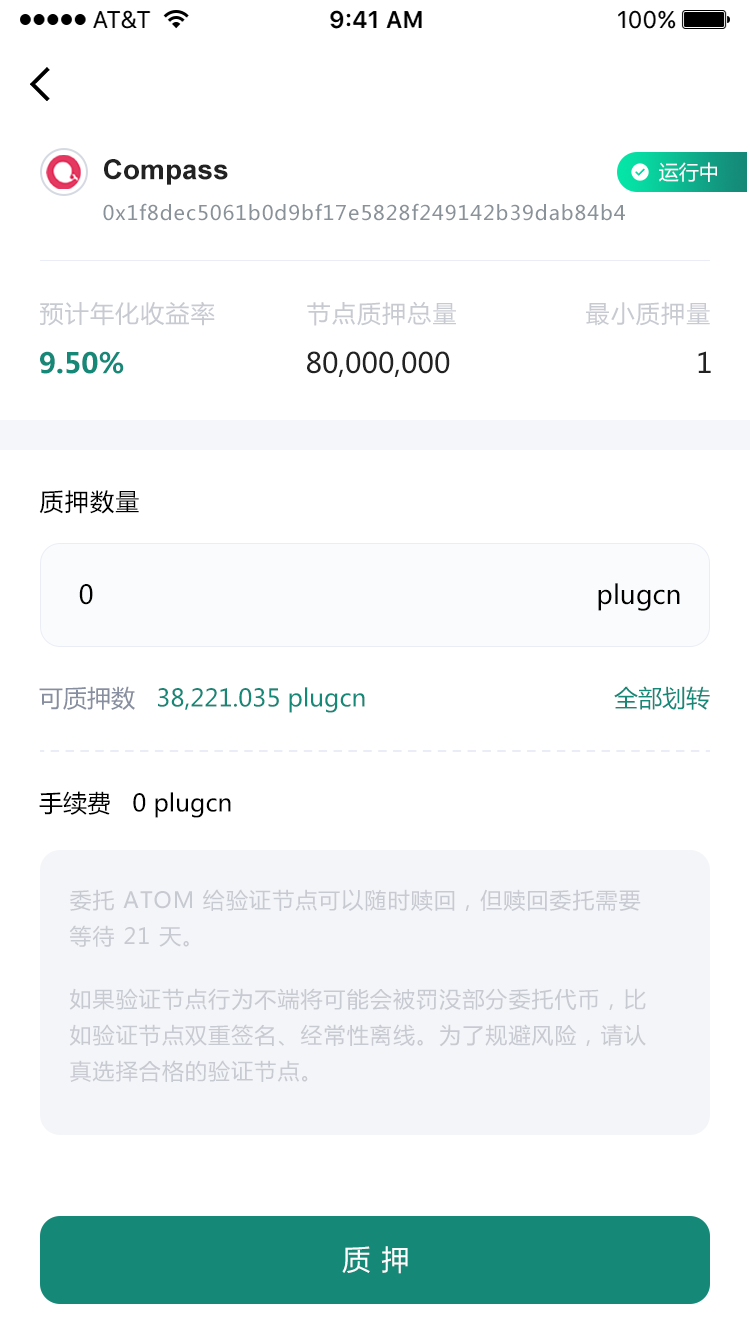
<style>
.page{position:relative;width:750px;height:1334px;background:#ffffff}
.page>*{position:absolute;margin:0}
.t1{font:28px "Arial-BoldMT";color:#222222}
.t2{font:20px "MicrosoftYaHei";color:#ffffff}
.t3{font:20px "MicrosoftYaHei";letter-spacing:0.05em;color:#8a9299}
.t4{font:24px "MicrosoftYaHei";letter-spacing:0.05em;color:#c8cad2}
.t5{font:28px "MicrosoftYaHei-Bold";color:#158878}
.t6{font:28px "MicrosoftYaHei";color:#222222}
.t7{font:24px "MicrosoftYaHei";letter-spacing:0.05em;color:#000000}
.t8{font:26px "MicrosoftYaHei";letter-spacing:0.05em;color:#000000}
.t9{font:26px "MicrosoftYaHei";color:#000000}
.t10{font:24px "MicrosoftYaHei";color:#168878}
.t11{font:24px "MicrosoftYaHei";color:#878e9f}
.t12{font:24px "MicrosoftYaHei";color:#000000}
.t13{font:22px/36px "MicrosoftYaHei";letter-spacing:0.05em;color:#c8cad2}
.t14{font:28px "MicrosoftYaHei";letter-spacing:0.05em;color:#ffffff}
</style>
<div class="page">
<p class="t1" style="left:104px;top:159px;width:124px;height:26px">Compass</p>
<p class="t2" style="left:659px;top:162px;width:58px;height:20px">运行中</p>
<p class="t3" style="left:103px;top:203px;width:522px;height:18px">0x1f8dec5061b0d9bf17e5828f249142b39dab84b4</p>
<p class="t4" style="left:40px;top:301px;width:175px;height:25px">预计年化收益率</p>
<p class="t4" style="left:307px;top:301px;width:149px;height:25px">节点质押总量</p>
<p class="t4" style="left:586px;top:302px;width:124px;height:24px">最小质押量</p>
<p class="t5" style="left:40px;top:351px;width:84px;height:23px">9.50%</p>
<p class="t6" style="left:307px;top:351px;width:143px;height:26px">80,000,000</p>
<p class="t6" style="left:698px;top:351px;width:13px;height:22px">1</p>
<p class="t7" style="left:39px;top:490px;width:100px;height:24px">质押数量</p>
<p class="t8" style="left:79px;top:584px;width:14px;height:21px">0</p>
<p class="t9" style="left:598px;top:583px;width:82px;height:28px">plugcn</p>
<p class="t10" style="left:39px;top:686px;width:326px;height:27px"><span class="t11">可质押数   </span>38,221.035 plugcn</p>
<p class="t10" style="left:614px;top:686px;width:96px;height:24px">全部划转</p>
<p class="t12" style="left:39px;top:791px;width:192px;height:27px">手续费   0 plugcn</p>
<p class="t13" style="left:69px;top:889px;width:572px;height:58px">委托 ATOM 给验证节点可以随时赎回，但赎回委托需要等待 21 天。</p>
<p class="t13" style="left:69px;top:988px;width:577px;height:94px">如果验证节点行为不端将可能会被罚没部分委托代币，比如验证节点双重签名、经常性离线。为了规避风险，请认真选择合格的验证节点。</p>
<p class="t14" style="left:342px;top:1246px;width:66px;height:28px">质 押</p>
</div>
